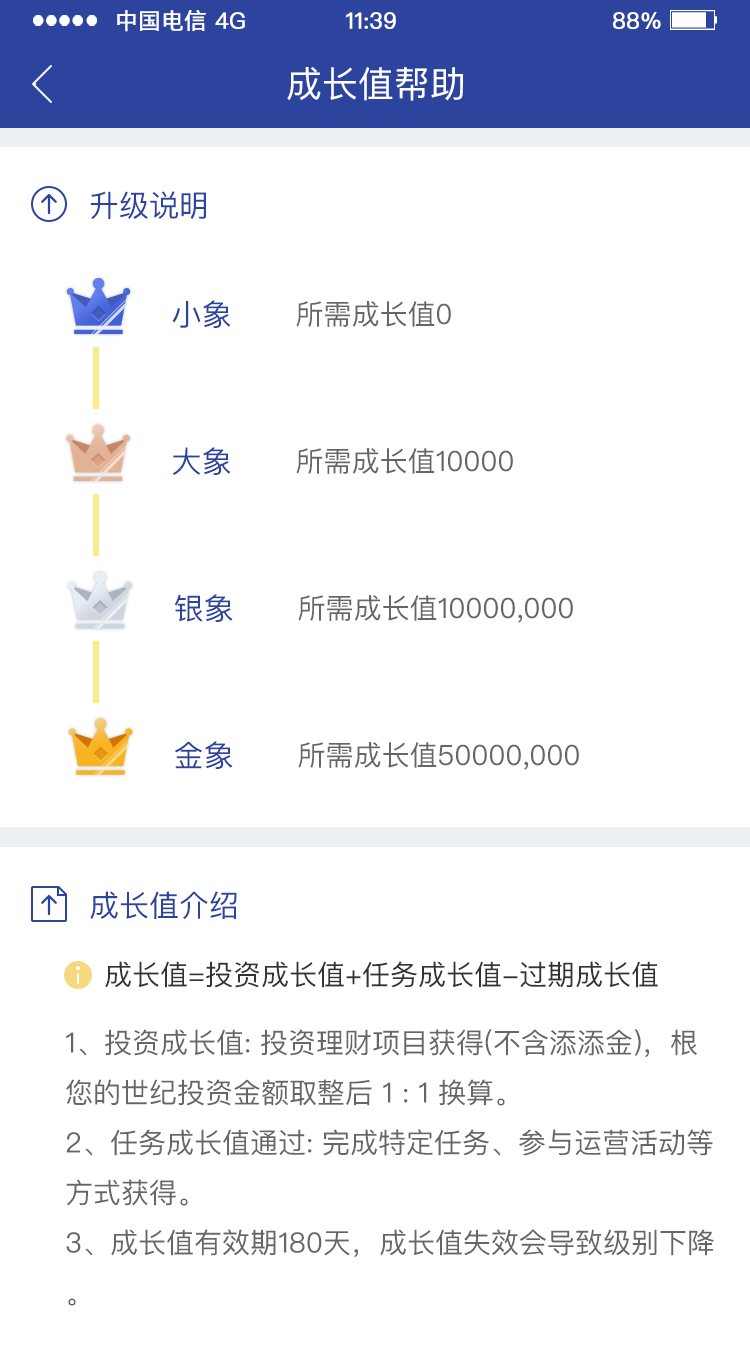
<style>
.page{position:relative;width:750px;height:1366px;background:#ffffff}
.page>*{position:absolute;margin:0}
.t1{font:22.5px "PingFangSC-Regular";color:#ffffff;text-transform:uppercase;font-weight:bold}
.t2{font:36px "PingFangSC-Regular";color:#ffffff;text-transform:uppercase}
.t3{font:30px "PingFangSC-Regular";color:#2d449f;text-transform:uppercase}
.t4{font:28px "PingFangSC-Regular";color:#666666;text-transform:uppercase}
.t5{font:28px "PingFangSC-Regular";color:#333333;text-transform:uppercase}
.t6{font:28px/50px "PingFangSC-Regular";color:#666666;text-transform:uppercase}
</style>
<div class="page">
<p class="t1" style="left:117px;top:10px;width:89px;height:22px">中国电信</p>
<p class="t1" style="left:215px;top:12px;width:30px;height:17px">4G</p>
<p class="t1" style="left:345px;top:12px;width:51px;height:17px">11:39</p>
<p class="t1" style="left:613px;top:12px;width:48px;height:17px">88%</p>
<p class="t2" style="left:287px;top:67px;width:176px;height:34px">成长值帮助</p>
<p class="t3" style="left:90px;top:191px;width:116px;height:28px">升级说明</p>
<p class="t3" style="left:172px;top:300px;width:59px;height:28px">小象</p>
<p class="t4" style="left:296px;top:301px;width:155px;height:26px">所需成长值0</p>
<p class="t3" style="left:172px;top:447px;width:59px;height:28px">大象</p>
<p class="t4" style="left:296px;top:448px;width:217px;height:26px">所需成长值10000</p>
<p class="t3" style="left:174px;top:594px;width:59px;height:28px">银象</p>
<p class="t4" style="left:298px;top:595px;width:275px;height:28px">所需成长值10000,000</p>
<p class="t3" style="left:175px;top:741px;width:58px;height:28px">金象</p>
<p class="t4" style="left:298px;top:742px;width:281px;height:28px">所需成长值50000,000</p>
<p class="t3" style="left:90px;top:891px;width:147px;height:28px">成长值介绍</p>
<p class="t5" style="left:105px;top:961px;width:553px;height:27px">成长值=投资成长值+任务成长值-过期成长值</p>
<p class="t6" style="left:66px;top:1029px;width:648px;height:277px">1、投资成长值: 投资理财项目获得(不含添添金)，根您的世纪投资金额取整后 1 : 1 换算。<br>2、任务成长值通过: 完成特定任务、参与运营活动等方式获得。<br>3、成长值有效期180天，成长值失效会导致级别下降。</p>
</div>
